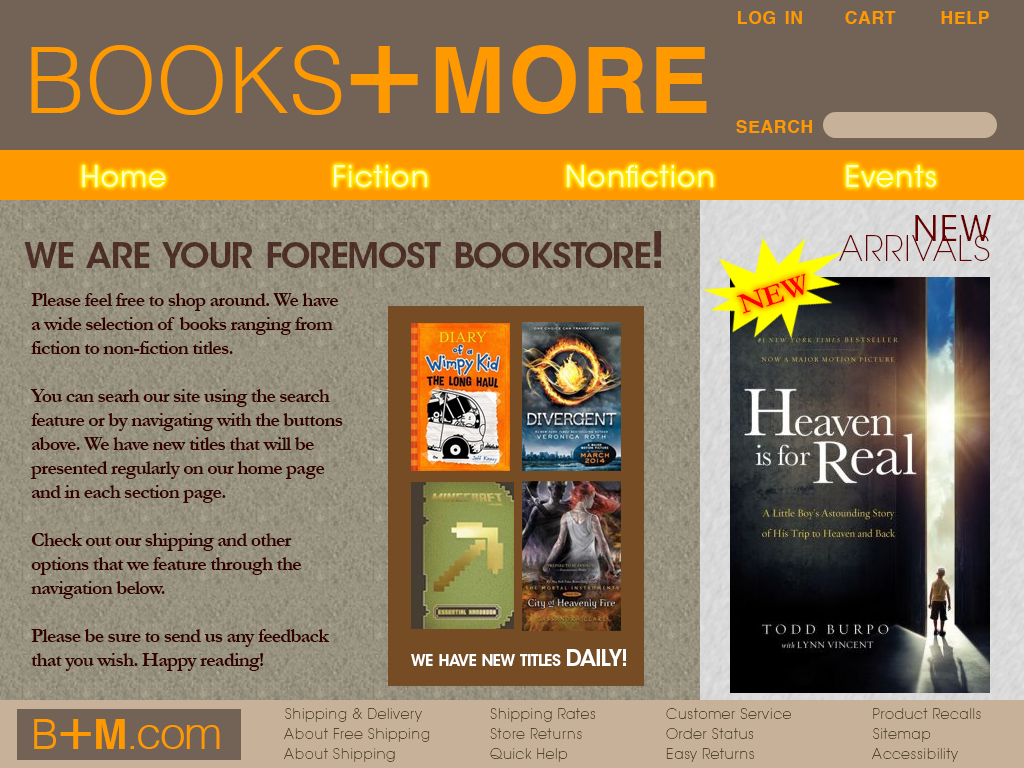
<style>
.page{position:relative;width:1024px;height:768px}
.page>*{position:absolute;margin:0}
.t1{font:25px "Helvetica-Bold";letter-spacing:0.04em;color:#ff9900;font-variant:small-caps}
.t2{font:131px "Helvetica-Light";color:#ff9900;font-variant:small-caps}
.t3{font:131px "Helvetica";letter-spacing:0.02em;color:#ff9900;font-variant:small-caps}
.t4{font:131px "Helvetica-Bold";letter-spacing:0.02em;color:#ff9900;font-variant:small-caps}
.t5{font:28.8px "ITCAvantGardeStd-Bk";letter-spacing:0.04em;color:#ffffcc}
.t6{font:34px/20px "ITCAvantGardeStd-XLt";letter-spacing:0.04em;color:#660000}
.t7{font:34px/20px "ITCAvantGardeStd-Bk";letter-spacing:0.04em;color:#660000}
.t8{font:50px "ITCAvantGardeStd-Demi";letter-spacing:-0.04em;color:#4e3029;font-variant:small-caps}
.t9{font:30px "Garamond-Bold";letter-spacing:-0.02em;color:#ff0000}
.t10{font:20px "Garamond-Bold";letter-spacing:-0.04em;color:#330000}
.t11{font:22px "ITCAvantGardeStd-Demi";letter-spacing:-0.04em;color:#ffffff;font-variant:small-caps}
.t12{font:14px/20px "ITCAvantGardeStd-XLt";letter-spacing:0.04em;color:#544627}
.t13{font:46.1px "Helvetica-Light";letter-spacing:-0.025em;color:#ff9900}
.t14{font:59.1px "Helvetica-Light";letter-spacing:-0.025em;color:#ff9900;font-variant:small-caps}
.t15{font:59.1px "Helvetica";letter-spacing:-0.025em;color:#ff9900;font-variant:small-caps}
.t16{font:59.1px "Helvetica-Bold";letter-spacing:-0.025em;color:#ff9900;font-variant:small-caps}
</style>
<div class="page">
<p class="t1" style="left:738px;top:11px;width:251px;height:13px">log in  cart    help</p>
<p class="t2" style="left:31px;top:45px;width:676px;height:70px">books<span class="t3">+</span><span class="t4">more</span></p>
<p class="t1" style="left:736px;top:120px;width:76px;height:13px">search</p>
<p class="t5" style="left:82px;top:165px;width:854px;height:22px">Home           Fiction          Nonfiction          Events</p>
<p class="t6" style="left:839px;top:215px;width:152px;height:46px;text-align:right"><span class="t7">NEW </span><br>ARRIVALS</p>
<p class="t8" style="left:24px;top:231px;width:637px;height:37px">we are your foremost bookstore!</p>
<p class="t9" style="left:736px;top:273px;width:70px;height:41px;rotate:-18deg">NEW</p>
<p class="t10" style="left:30px;top:293px;width:313px;height:378px">Please feel free to shop around. We have a wide selection of books ranging from fiction to non-fiction titles. <br><br>You can searh our site using the search feature or by navigating with the buttons above. We have new titles that will be presented regularly on our home page and in each section page. <br><br>Check out our shipping and other options that we feature through the navigation below. <br><br>Please be sure to send us any feedback that you wish. Happy reading!</p>
<p class="t11" style="left:411px;top:649px;width:215px;height:17px">we have new titles DAILY!</p>
<p class="t12" style="left:284px;top:708px;width:146px;height:54px">Shipping &amp; Delivery<br>About Free Shipping<br>About Shipping</p>
<p class="t12" style="left:490px;top:708px;width:106px;height:54px">Shipping Rates<br>Store Returns     <br>Quick Help</p>
<p class="t12" style="left:666px;top:708px;width:126px;height:54px">Customer Service<br>Order Status<br>Easy Returns</p>
<p class="t12" style="left:872px;top:708px;width:109px;height:54px">Product Recalls<br>Sitemap<br>Accessibility</p>
<p class="t13" style="left:34px;top:719px;width:186px;height:30px"><span class="t14">b</span><span class="t15">+</span><span class="t16">m</span>.com</p>
</div>
